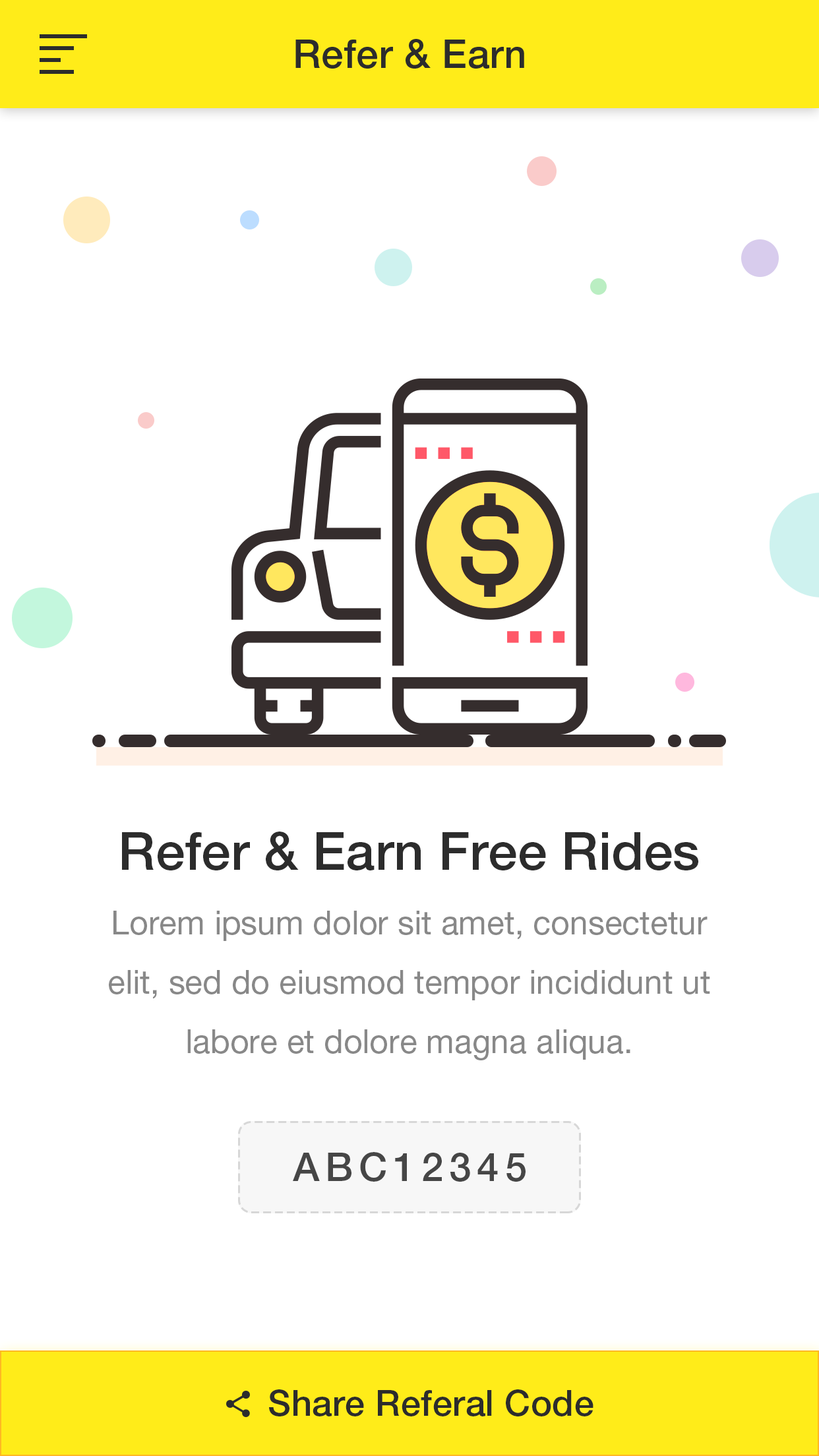
<style>
.page{position:relative;width:819px;height:1456px;background:#ffffff}
.page>*{position:absolute;margin:0}
.t1{font:39.6px "HelveticaNeueLTStd-Md";letter-spacing:0.01em;color:#2c2c2c}
.t2{font:52.8px "HelveticaNeueLTStd-Md";color:#2c2c2c}
.t3{font:33px/59.3px "HelveticaNeueLTStd-Roman";color:#888888}
.t4{font:39.6px "HelveticaNeueLTStd-Md";letter-spacing:0.15em;color:#464646}
.t5{font:35.6px "HelveticaNeueLTStd-Md";letter-spacing:0.01em;color:#2c2c2c}
</style>
<div class="page">
<p class="t1" style="left:295px;top:39px;width:229px;height:30px">Refer &amp; Earn</p>
<p class="t2" style="left:122px;top:832px;width:576px;height:38px">Refer &amp; Earn Free Rides</p>
<p class="t3" style="left:109px;top:911px;width:601px;height:149px;text-align:center">Lorem ipsum dolor sit amet, consectetur<br>elit, sed do eiusmod tempor incididunt ut<br>labore et dolore magna aliqua.</p>
<p class="t4" style="left:293px;top:1152px;width:233px;height:30px">ABC12345</p>
<p class="t5" style="left:269px;top:1389px;width:324px;height:27px">Share Referal Code</p>
</div>
